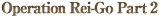
<style>
.page{position:relative;width:161px;height:19px;background:#ffffff}
.page>*{position:absolute;margin:0}
.t1{font:15px "RyuminPro-ExBold";letter-spacing:-0.08em;color:#69553d;font-weight:bold}
</style>
<div class="page">
<p class="t1" style="left:1px;top:1px;width:157px;height:15px">Operation Rei-Go Part 2</p>
</div>
